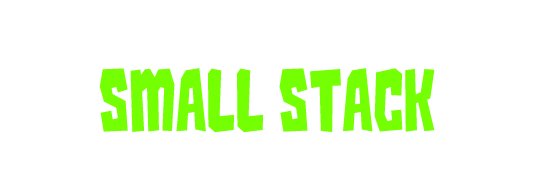
<style>
.page{position:relative;width:545px;height:188px;background:#ffffff}
.page>*{position:absolute;margin:0}
.t1{font:76.1px "Kaiju-Monster__G";color:#74ff02}
</style>
<div class="page">
<p class="t1" style="left:99px;top:68px;width:336px;height:65px">Small Stack</p>
</div>
